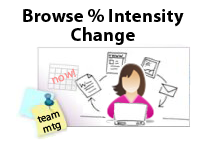
<style>
.page{position:relative;width:200px;height:150px;background:#ffffff}
.page>*{position:absolute;margin:0}
.t1{font:18.7px/18.7px "MyriadPro-Bold";letter-spacing:0.01em;color:#000000}
.t2{font:12px "MyriadPro-Regular";letter-spacing:0.01em;color:#fe9292}
.t3{font:10.7px/10.7px "MyriadPro-Regular";letter-spacing:0.01em;color:#030303}
</style>
<div class="page">
<p class="t1" style="left:23px;top:9px;width:161px;height:36px;text-align:center">Browse % Intensity<br>Change</p>
<p class="t2" style="left:51px;top:68px;width:25px;height:16px;rotate:-19deg">now!</p>
<p class="t3" style="left:37px;top:111px;width:25px;height:22px;text-align:center;rotate:-19deg">team<br>mtg</p>
</div>
